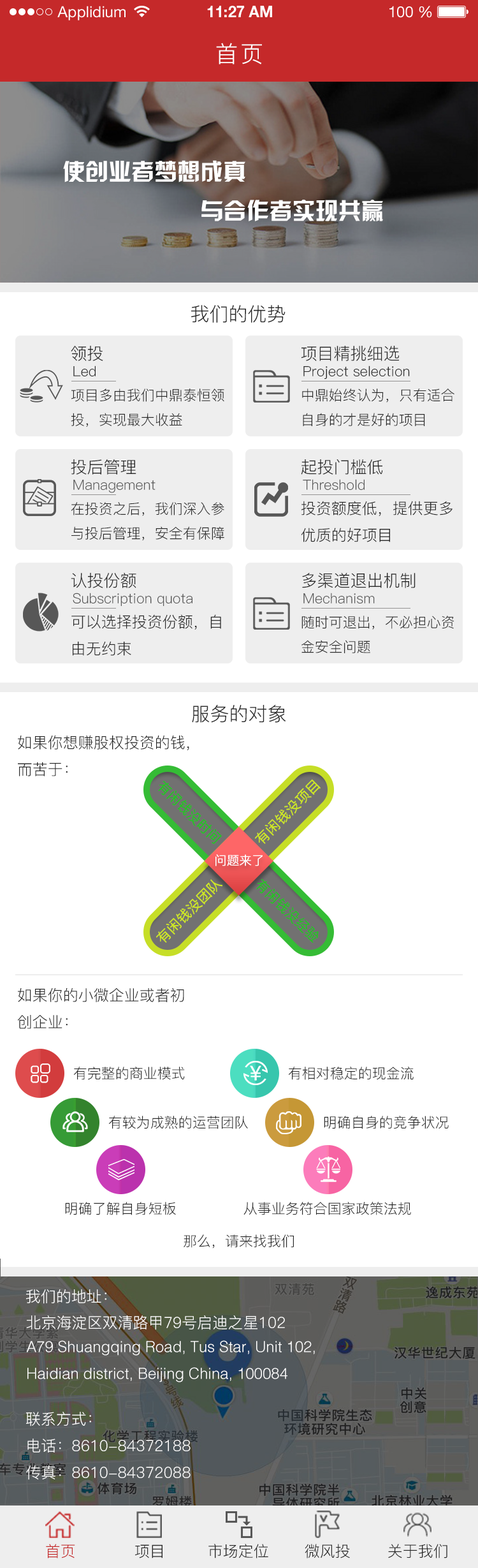
<style>
.page{position:relative;width:478px;height:1568px;background:#ffffff}
.page>*{position:absolute;margin:0}
.t1{font:15.3px "HelveticaNeueLTStd-Roman";color:#ffffff}
.t2{font:15.3px "HelveticaNeueLTStd-Bd";color:#ffffff}
.t3{font:23px "PingFang-SC-Regular";letter-spacing:0.1em;color:#ffffff;text-transform:uppercase}
.t4{font:23px "JLinXin";color:#ffffff}
.t5{font:19.1px "PingFang-SC-Regular";color:#282828}
.t6{font:16.6px "PingFang-SC-Regular";color:#282828}
.t7{font:14px "PingFang-SC-Regular";color:#282828}
.t8{font:14px "PingFang-SC-Regular";color:#575757}
.t9{font:15.3px "PingFang-SC-Regular";color:#282828}
.t10{font:13.4px "PingFang-SC-Regular";color:#24c124;font-weight:bold}
.t11{font:13.8px "PingFang-SC-Regular";color:#cfe921;font-weight:bold}
.t12{font:12.2px "PingFang-SC-Regular";color:#ffffff;font-weight:bold}
.t13{font:15.3px "PingFang-SC-Regular";color:#ffffff}
.t14{font:15.3px "HelvLight-Normal";color:#ffffff}
.t15{font:15.3px "PingFang-SC-Regular";color:#c5292a}
</style>
<div class="page">
<p class="t1" style="left:57px;top:6px;width:69px;height:14px">Applidium</p>
<p class="t2" style="left:207px;top:6px;width:65px;height:11px">11:27 AM</p>
<p class="t1" style="left:390px;top:6px;width:43px;height:12px">100 %</p>
<p class="t3" style="left:216px;top:43px;width:46px;height:21px">首页</p>
<p class="t4" style="left:63px;top:160px;width:183px;height:22px">使创业者梦想成真</p>
<p class="t4" style="left:202px;top:200px;width:181px;height:21px">与合作者实现共赢</p>
<p class="t5" style="left:191px;top:305px;width:95px;height:18px">我们的优势</p>
<p class="t6" style="left:71px;top:346px;width:32px;height:15px">领投</p>
<p class="t6" style="left:301px;top:346px;width:99px;height:15px">项目精挑细选</p>
<p class="t7" style="left:73px;top:366px;width:23px;height:10px">Led</p>
<p class="t7" style="left:304px;top:366px;width:106px;height:13px">Project selection</p>
<p class="t7" style="left:71px;top:388px;width:154px;height:39px">项目多由我们中鼎泰恒领<br>投，实现最大收益</p>
<p class="t7" style="left:302px;top:388px;width:153px;height:38px">中鼎始终认为，只有适合<br>自身的才是好的项目</p>
<p class="t6" style="left:71px;top:459px;width:66px;height:16px">投后管理</p>
<p class="t6" style="left:301px;top:459px;width:82px;height:16px">起投门槛低</p>
<p class="t8" style="left:73px;top:480px;width:83px;height:13px">Management</p>
<p class="t8" style="left:303px;top:479px;width:62px;height:11px">Threshold</p>
<p class="t7" style="left:71px;top:502px;width:154px;height:39px">在投资之后，我们深入参<br>与投后管理，安全有保障</p>
<p class="t9" style="left:301px;top:501px;width:152px;height:41px">投资额度低，提供更多<br>优质的好项目</p>
<p class="t6" style="left:71px;top:573px;width:66px;height:15px">认投份额</p>
<p class="t6" style="left:302px;top:573px;width:114px;height:15px">多渠道退出机制</p>
<p class="t8" style="left:73px;top:593px;width:120px;height:13px">Subscription quota</p>
<p class="t8" style="left:304px;top:593px;width:71px;height:10px">Mechanism</p>
<p class="t9" style="left:71px;top:614px;width:150px;height:42px">可以选择投资份额，自<br>由无约束</p>
<p class="t7" style="left:302px;top:616px;width:153px;height:37px">随时可退出，不必担心资<br>金安全问题</p>
<p class="t5" style="left:192px;top:705px;width:94px;height:18px">服务的对象</p>
<p class="t9" style="left:18px;top:735px;width:171px;height:41px">如果你想赚股权投资的钱，<br>而苦于：</p>
<p class="t10" style="left:158px;top:781px;width:64px;height:63px;rotate:44deg">有闲钱没时间</p>
<p class="t11" style="left:255px;top:779px;width:66px;height:65px;rotate:-45deg">有闲钱没项目</p>
<p class="t12" style="left:216px;top:854px;width:47px;height:12px">问题来了</p>
<p class="t11" style="left:156px;top:879px;width:67px;height:64px;rotate:-45deg">有闲钱没团队</p>
<p class="t10" style="left:256px;top:879px;width:63px;height:64px;rotate:44deg">有闲钱没经验</p>
<p class="t9" style="left:17px;top:987px;width:167px;height:42px">如果你的小微企业或者初<br>创企业：</p>
<p class="t7" style="left:73px;top:1067px;width:112px;height:13px">有完整的商业模式</p>
<p class="t7" style="left:288px;top:1067px;width:126px;height:13px">有相对稳定的现金流</p>
<p class="t7" style="left:108px;top:1116px;width:140px;height:13px">有较为成熟的运营团队</p>
<p class="t7" style="left:324px;top:1116px;width:125px;height:13px">明确自身的竞争状况</p>
<p class="t7" style="left:65px;top:1202px;width:111px;height:13px">明确了解自身短板</p>
<p class="t7" style="left:244px;top:1202px;width:167px;height:13px">从事业务符合国家政策法规</p>
<p class="t7" style="left:184px;top:1234px;width:110px;height:14px">那么，请来找我们</p>
<p class="t13" style="left:26px;top:1289px;width:81px;height:15px">我们的地址：</p>
<p class="t13" style="left:26px;top:1315px;width:259px;height:15px">北京海淀区双清路甲79号启迪之星102</p>
<p class="t14" style="left:26px;top:1340px;width:289px;height:42px">A79 Shuangqing Road, Tus Star, Unit 102, <br>Haidian district, Beijing China, 100084</p>
<p class="t13" style="left:26px;top:1412px;width:65px;height:14px">联系方式：</p>
<p class="t13" style="left:26px;top:1439px;width:165px;height:41px">电话：8610-84372188<br>传真：8610-84372088</p>
<p class="t15" style="left:46px;top:1544px;width:29px;height:14px">首页</p>
<p class="t9" style="left:135px;top:1544px;width:28px;height:14px">项目</p>
<p class="t9" style="left:209px;top:1544px;width:60px;height:14px">市场定位</p>
<p class="t9" style="left:305px;top:1544px;width:45px;height:14px">微风投</p>
<p class="t9" style="left:388px;top:1544px;width:60px;height:14px">关于我们</p>
</div>
